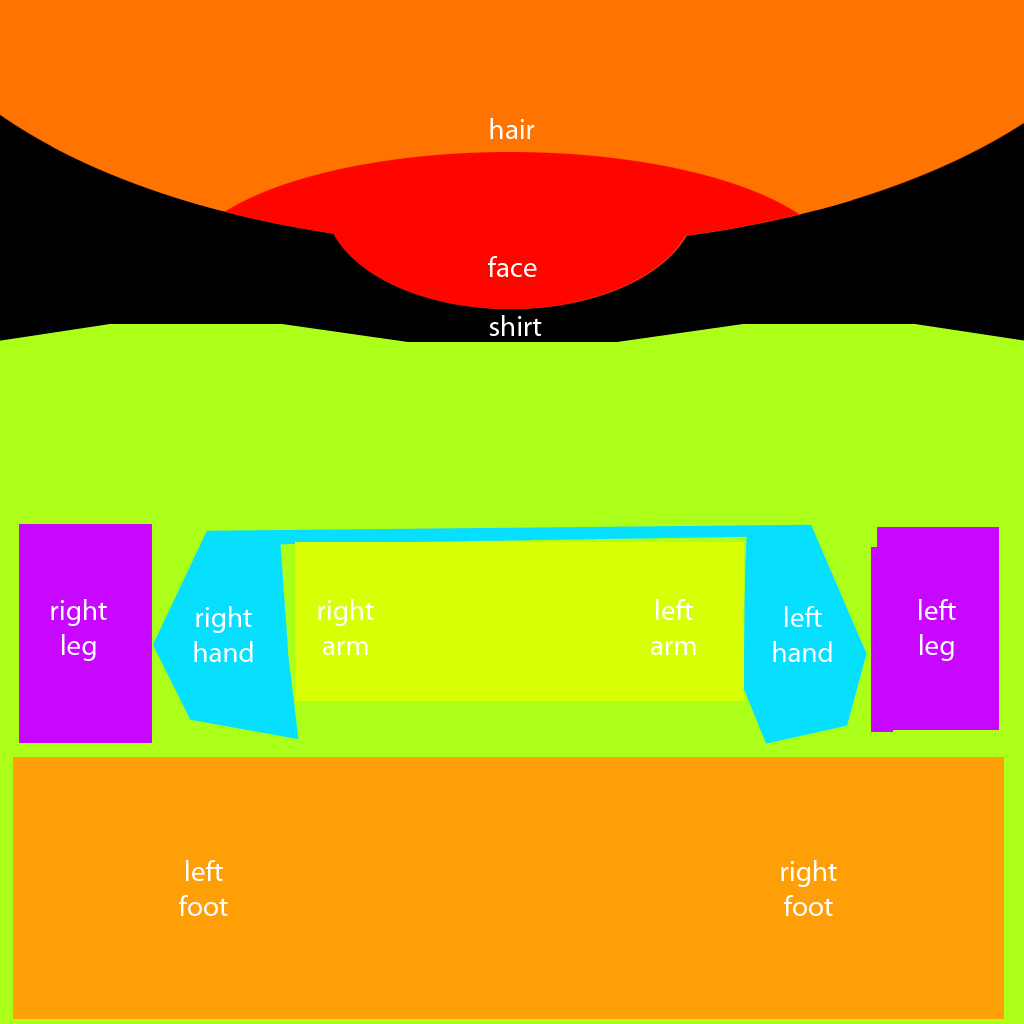
<style>
.page{position:relative;width:1024px;height:1024px;background:#ff9f07}
.page>*{position:absolute;margin:0}
.t1{font:29px "MyriadPro-Regular";color:#ffffff}
</style>
<div class="page">
<p class="t1" style="left:490px;top:118px;width:45px;height:21px">hair</p>
<p class="t1" style="left:488px;top:256px;width:49px;height:21px">face</p>
<p class="t1" style="left:489px;top:315px;width:53px;height:21px">shirt</p>
<p class="t1" style="left:51px;top:599px;width:56px;height:62px;text-align:center">right<br>leg</p>
<p class="t1" style="left:194px;top:606px;width:59px;height:56px;text-align:center">right<br>hand</p>
<p class="t1" style="left:318px;top:599px;width:56px;height:56px;text-align:center">right<br>arm</p>
<p class="t1" style="left:651px;top:599px;width:45px;height:56px;text-align:center">left<br>arm</p>
<p class="t1" style="left:773px;top:606px;width:59px;height:56px;text-align:center">left<br>hand</p>
<p class="t1" style="left:919px;top:599px;width:37px;height:62px;text-align:center">left<br>leg</p>
<p class="t1" style="left:179px;top:860px;width:49px;height:56px;text-align:center">left<br>foot</p>
<p class="t1" style="left:781px;top:860px;width:56px;height:56px;text-align:center">right<br>foot</p>
</div>
